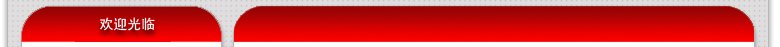
<style>
.page{position:relative;width:780px;height:47px}
.page>*{position:absolute;margin:0}
.t1{font:14px "SimHei";color:#ffffff}
</style>
<div class="page">
<p class="t1" style="left:100px;top:17px;width:55px;height:14px">欢迎光临</p>
</div>
